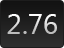
<style>
.page{position:relative;width:64px;height:48px}
.page>*{position:absolute;margin:0}
.t1{font:28px "SegoeUI"}
</style>
<div class="page">
<p class="t1" style="left:7px;top:14px;width:50px;height:20px">2.76</p>
</div>
